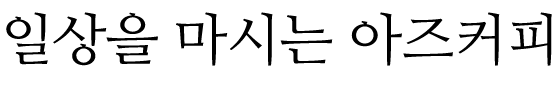
<style>
.page{position:relative;width:559px;height:85px;background:#ffffff}
.page>*{position:absolute;margin:0}
.t1{font:56px "NanumMyeongjo";letter-spacing:-0.01em;color:#000000}
</style>
<div class="page">
<p class="t1" style="left:6px;top:12px;width:546px;height:54px">일상을 마시는 아즈커피</p>
</div>
